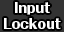
<style>
.page{position:relative;width:64px;height:32px;background:#333333}
.page>*{position:absolute;margin:0}
.t1{font:13.7px "FolkPro-Heavy";color:#ffffff}
</style>
<div class="page">
<p class="t1" style="left:4px;top:2px;width:57px;height:27px;text-align:center">Input<br>Lockout</p>
</div>
